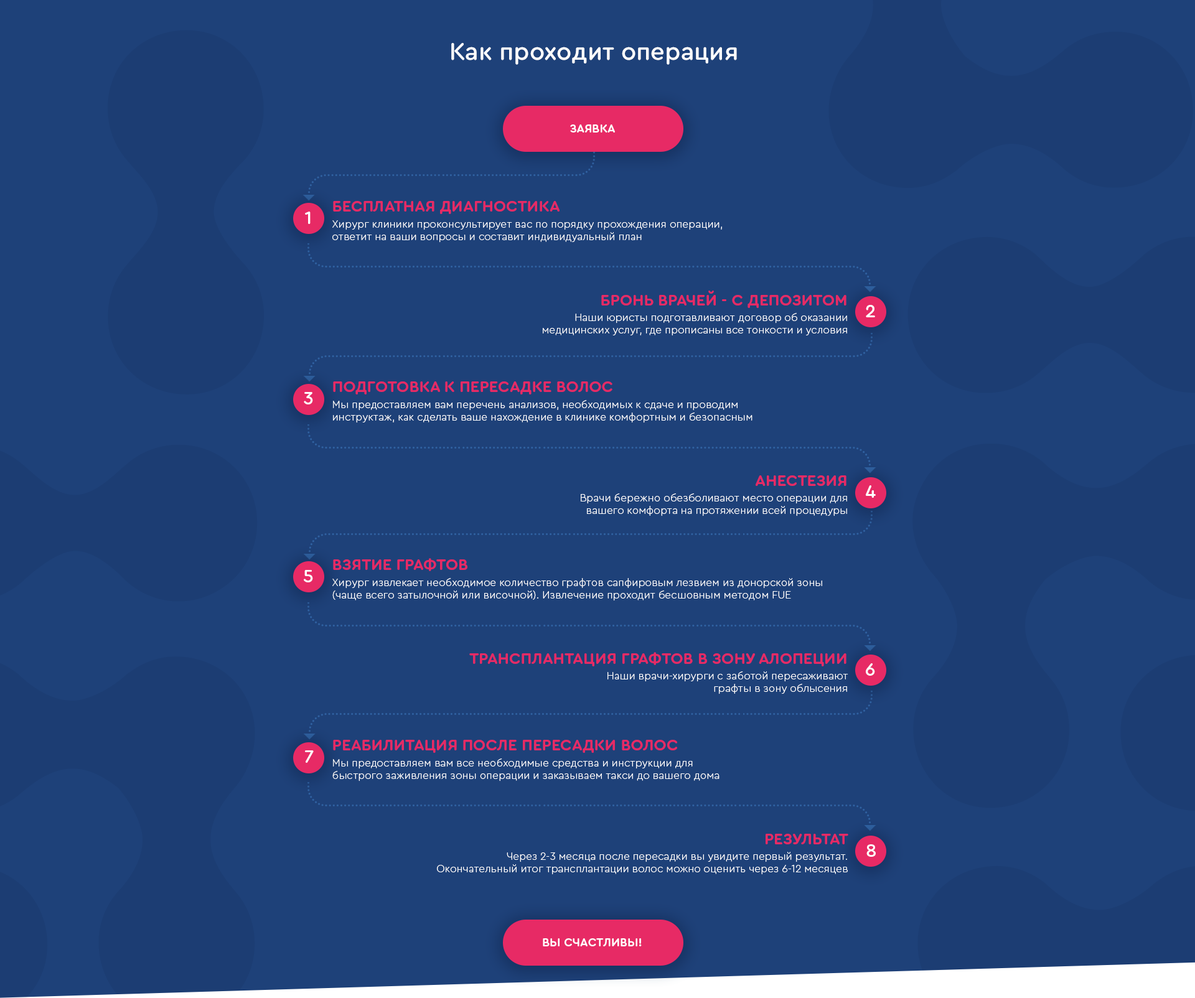
<style>
.page{position:relative;width:1195px;height:998px;background:#1e4179}
.page>*{position:absolute;margin:0}
.t1{font:24.9px "CeraRoundPro-Medium";color:#ffffff}
.t2{font:11.9px "CeraRoundPro-Bold";color:#ffffff;text-transform:uppercase}
.t3{font:16.1px "CeraRoundPro-Bold";color:#e72a65;text-transform:uppercase}
.t4{font:18.7px "CeraRoundPro-Medium";color:#ffffff;text-transform:uppercase}
.t5{font:10.7px/12.5px "CeraRoundPro-Light";color:#ffffff}
.t6{font:10.7px/12.5px "CeraRoundPro-Light";color:#fefefe}
</style>
<div class="page">
<p class="t1" style="left:451px;top:43px;width:286px;height:22px">Как проходит операция</p>
<p class="t2" style="left:570px;top:124px;width:45px;height:9px">Заявка</p>
<p class="t3" style="left:333px;top:201px;width:226px;height:13px">БЕСПЛАТНАЯ ДИАГНОСТИКА</p>
<p class="t4" style="left:305px;top:212px;width:6px;height:12px">1</p>
<p class="t5" style="left:332px;top:220px;width:390px;height:23px">Хирург клиники проконсультирует вас по порядку прохождения операции,<br>ответит на ваши вопросы и составит индивидуальный план</p>
<p class="t3" style="left:601px;top:291px;width:245px;height:17px">БРОНЬ ВРАЧЕЙ - С ДЕПОЗИТОМ</p>
<p class="t4" style="left:866px;top:305px;width:9px;height:12px">2</p>
<p class="t5" style="left:543px;top:313px;width:304px;height:23px;text-align:right">Наши юристы подготавливают договор об оказании<br>медицинских услуг, где прописаны все тонкости и условия</p>
<p class="t3" style="left:333px;top:381px;width:279px;height:14px">ПОДГОТОВКА К ПЕРЕСАДКЕ ВОЛОС</p>
<p class="t4" style="left:304px;top:392px;width:9px;height:12px">3</p>
<p class="t5" style="left:333px;top:400px;width:419px;height:23px">Мы предоставляем вам перечень анализов, необходимых к сдаче и проводим<br>инструктаж, как сделать ваше нахождение в клинике комфортным и безопасным</p>
<p class="t3" style="left:755px;top:475px;width:91px;height:11px">АНЕСТЕЗИЯ</p>
<p class="t4" style="left:866px;top:485px;width:10px;height:13px">4</p>
<p class="t5" style="left:581px;top:493px;width:266px;height:23px;text-align:right">Врачи бережно обезболивают место операции для<br>вашего комфорта на протяжении всей процедуры</p>
<p class="t4" style="left:304px;top:570px;width:9px;height:12px">5</p>
<p class="t3" style="left:333px;top:558px;width:134px;height:13px">ВЗЯТИЕ ГРАФТОВ</p>
<p class="t5" style="left:332px;top:578px;width:490px;height:23px">Хирург извлекает необходимое количество графтов сапфировым лезвием из донорской зоны<br>(чаще всего затылочной или височной). Извлечение проходит бесшовным методом FUE</p>
<p class="t3" style="left:469px;top:652px;width:377px;height:14px">ТРАНСПЛАНТАЦИЯ ГРАФТОВ В ЗОНУ АЛОПЕЦИИ</p>
<p class="t4" style="left:866px;top:663px;width:9px;height:13px">6</p>
<p class="t5" style="left:607px;top:671px;width:241px;height:23px;text-align:right">Наши врачи-хирурги с заботой пересаживают<br>графты в зону облысения</p>
<p class="t3" style="left:333px;top:740px;width:344px;height:13px">РЕАБИЛИТАЦИЯ ПОСЛЕ ПЕРЕСАДКИ ВОЛОС</p>
<p class="t4" style="left:305px;top:750px;width:9px;height:13px">7</p>
<p class="t6" style="left:332px;top:759px;width:387px;height:23px">Мы предоставляем вам все необходимые средства и инструкции для<br>быстрого заживления зоны операции и заказываем такси до вашего дома</p>
<p class="t3" style="left:765px;top:834px;width:83px;height:10px">РЕЗУЛЬТАТ</p>
<p class="t4" style="left:866px;top:844px;width:10px;height:13px">8</p>
<p class="t5" style="left:437px;top:852px;width:411px;height:23px;text-align:right">Через 2-3 месяца после пересадки вы увидите первый результат.<br>Окончательный итог трансплантации волос можно оценить через 6-12 месяцев</p>
<p class="t2" style="left:543px;top:938px;width:99px;height:8px">Вы счастливы!</p>
</div>
